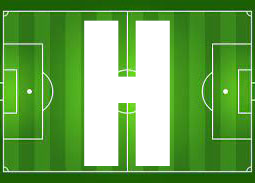
<style>
.page{position:relative;width:255px;height:183px;background:#ffffff}
.page>*{position:absolute;margin:0}
.t1{font:200px "AkbalthomMolleak1";color:#ffffff}
</style>
<div class="page">
<p class="t1" style="left:84px;top:20px;width:86px;height:146px">H</p>
</div>
